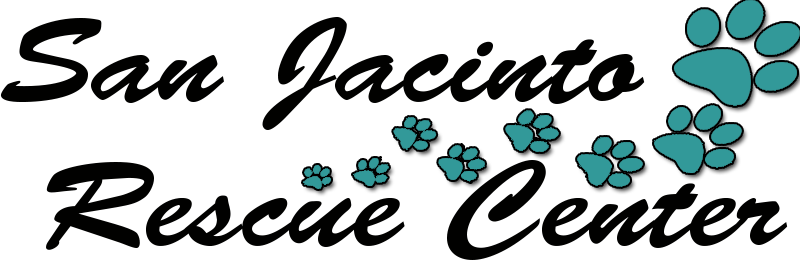
<style>
.page{position:relative;width:800px;height:278px;background:#ffffff}
.page>*{position:absolute;margin:0}
.t1{font:120.3px "BrushScriptStd";color:#010100;scale:1.11 1}
</style>
<div class="page">
<p class="t1" style="left:0px;top:17px;width:788px;height:243px">San Jacinto<br> Rescue Center</p>
</div>
